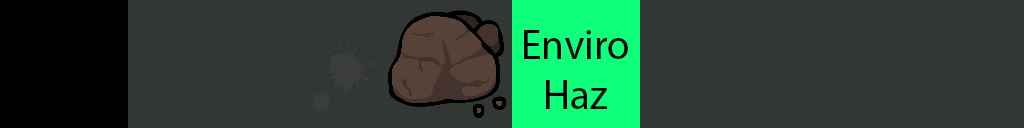
<style>
.page{position:relative;width:1024px;height:128px;background:#333733}
.page>*{position:absolute;margin:0}
.t1{font:41.7px "MyriadPro-Regular";color:#000000}
</style>
<div class="page">
<p class="t1" style="left:524px;top:30px;width:104px;height:79px;text-align:center">Enviro<br>Haz</p>
</div>
